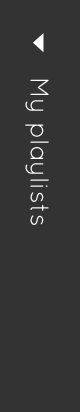
<style>
.page{position:relative;width:80px;height:412px;background:#333333}
.page>*{position:absolute;margin:0}
.t1{font:26px "QuicksandBook-Regular";color:#ffffff}
</style>
<div class="page">
<p class="t1" style="left:25px;top:79px;width:24px;height:146px;rotate:90deg">My playlists</p>
</div>
